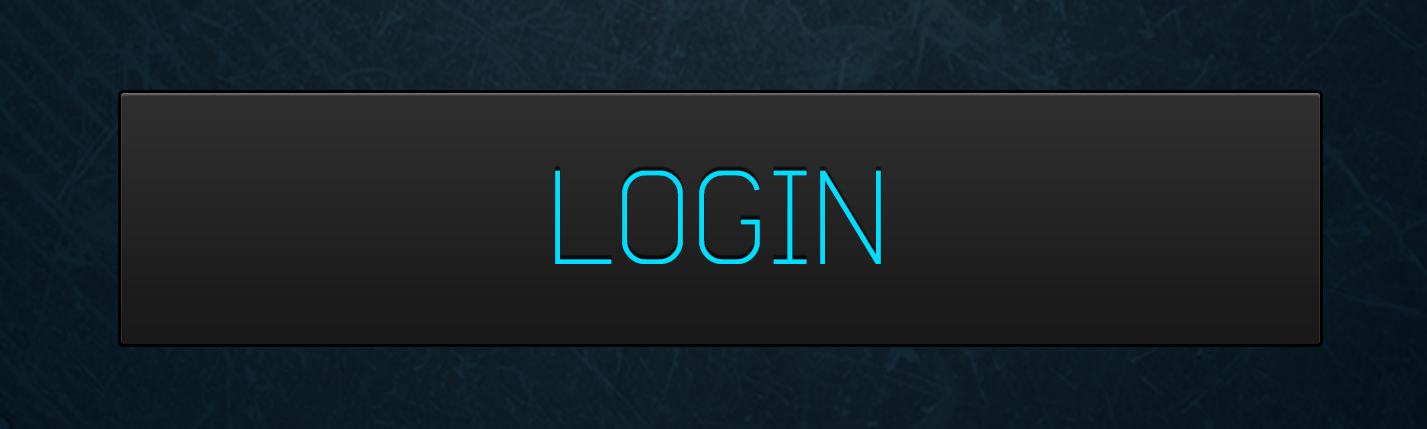
<style>
.page{position:relative;width:1427px;height:429px}
.page>*{position:absolute;margin:0}
.t1{font:130px "BaksheeshThin";color:#00deff}
</style>
<div class="page">
<p class="t1" style="left:555px;top:170px;width:326px;height:94px">LOGIN</p>
</div>
